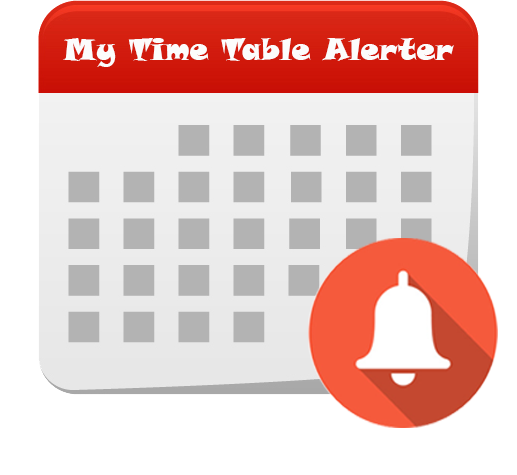
<style>
.page{position:relative;width:517px;height:475px;background:#ffffff}
.page>*{position:absolute;margin:0}
.t1{font:30px "SnapITC-Regular";color:#fcfcfc}
</style>
<div class="page">
<p class="t1" style="left:63px;top:38px;width:391px;height:29px">My Time Table Alerter</p>
</div>
